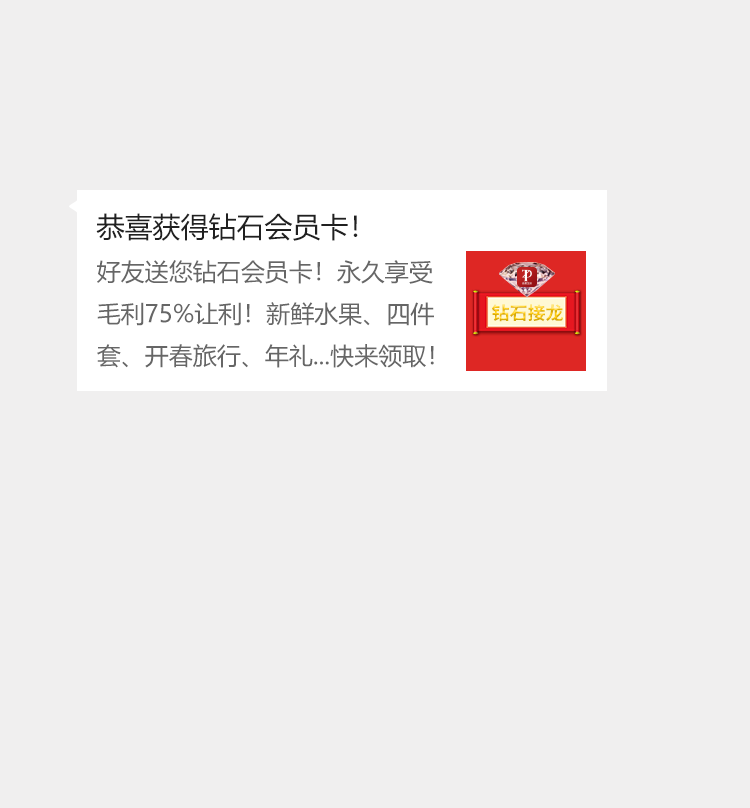
<style>
.page{position:relative;width:750px;height:808px;background:#f0efef}
.page>*{position:absolute;margin:0}
.t1{font:28px "MicrosoftYaHei";color:#202020;text-transform:uppercase}
.t2{font:24px "MicrosoftYaHei";color:#666666;text-transform:uppercase}
.t3{font:18px "SourceHanSansCN-Bold"}
</style>
<div class="page">
<p class="t1" style="left:96px;top:213px;width:262px;height:28px">恭喜获得钻石会员卡！</p>
<p class="t2" style="left:97px;top:260px;width:337px;height:108px">好友送您钻石会员卡！永久享受<br>毛利75%让利！新鲜水果、四件<br>套、开春旅行、年礼...快来领取！</p>
<p class="t3" style="left:492px;top:304px;width:71px;height:18px">钻石接龙</p>
</div>
